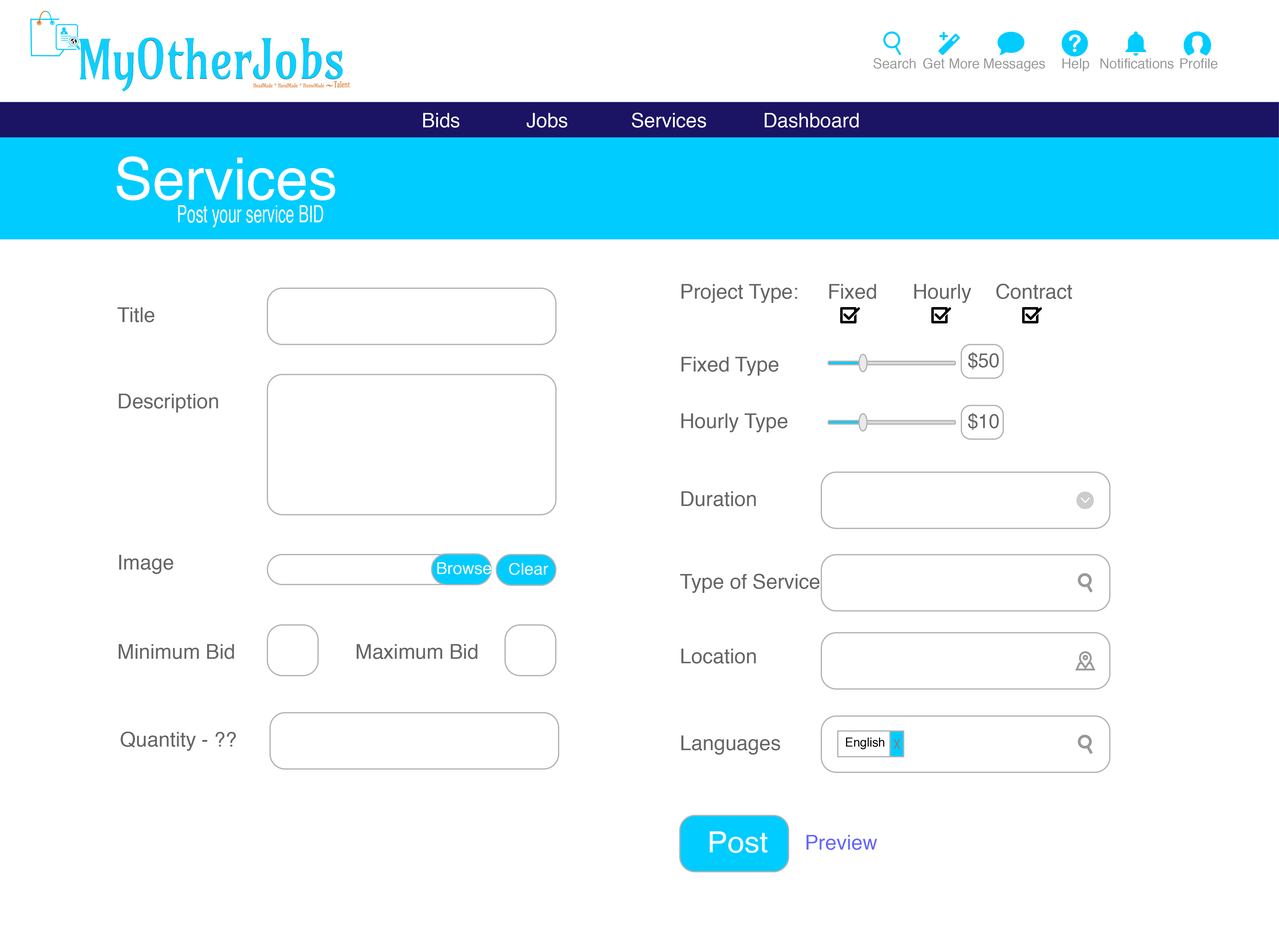
<style>
.page{position:relative;width:1279px;height:932px;background:#ffffff}
.page>*{position:absolute;margin:0}
.t1{font:54.1px "Amarante-Regular";color:#0fcefe;scale:0.9 1}
.t2{font:54.1px "Amarante-Regular";color:#0fcefe;scale:0.89 1}
.t3{font:13.7px "MyriadPro-Regular";color:#999999}
.t4{font:5.4px "Amarante-Regular";color:#de791f;scale:0.84 1}
.t5{font:8.6px "Amarante-Regular";color:#de791f;scale:1.4 1}
.t6{font:8.6px "Amarante-Regular";color:#de791f;scale:0.7 1}
.t7{font:19.8px "MyriadPro-Regular";color:#ffffff}
.t8{font:58.3px "MyriadPro-Regular";color:#ffffff}
.t9{font:23.5px "MyriadPro-Regular";color:#ffffff;scale:0.65 1}
.t10{font:20.4px "MyriadPro-Regular";color:#666666}
.t11{font:20.3px "MyriadPro-Regular";color:#666666;scale:0.95 1}
.t12{font:16.1px "MyriadPro-Regular";color:#ffffff;scale:1.04 1}
.t13{font:12.2px "MyriadPro-Regular";color:#000000}
.t14{font:29.4px "MyriadPro-Regular";color:#ffffff;scale:1.04 1}
.t15{font:20.4px "MyriadPro-Regular";color:#6666ff}
</style>
<div class="page">
<p class="t1" style="left:79px;top:39px;width:55px;height:52px">My</p>
<p class="t2" style="left:138px;top:37px;width:113px;height:42px">Other</p>
<p class="t1" style="left:253px;top:38px;width:90px;height:41px">Jobs</p>
<p class="t3" style="left:873px;top:58px;width:43px;height:11px">Search</p>
<p class="t3" style="left:923px;top:58px;width:56px;height:11px">Get More</p>
<p class="t3" style="left:984px;top:58px;width:61px;height:13px">Messages</p>
<p class="t3" style="left:1062px;top:58px;width:27px;height:13px">Help</p>
<p class="t3" style="left:1100px;top:58px;width:74px;height:11px">Notifications</p>
<p class="t3" style="left:1180px;top:58px;width:37px;height:11px">Profile</p>
<p class="t4" style="left:254px;top:83px;width:70px;height:5px">HeadMade * HandMade * HomeMade</p>
<p class="t5" style="left:326px;top:85px;width:7px;height:2px">~</p>
<p class="t6" style="left:334px;top:81px;width:16px;height:7px">Talent</p>
<p class="t7" style="left:423px;top:113px;width:36px;height:15px">Bids</p>
<p class="t7" style="left:527px;top:113px;width:40px;height:15px">Jobs</p>
<p class="t7" style="left:632px;top:113px;width:74px;height:15px">Services</p>
<p class="t7" style="left:765px;top:113px;width:94px;height:15px">Dashboard</p>
<p class="t8" style="left:117px;top:156px;width:218px;height:45px">Services</p>
<p class="t9" style="left:178px;top:205px;width:145px;height:22px">Post your service BID</p>
<p class="t10" style="left:681px;top:284px;width:116px;height:19px">Project Type:</p>
<p class="t10" style="left:829px;top:284px;width:47px;height:15px">Fixed</p>
<p class="t10" style="left:914px;top:284px;width:57px;height:19px">Hourly</p>
<p class="t10" style="left:996px;top:284px;width:76px;height:15px">Contract</p>
<p class="t10" style="left:117px;top:308px;width:37px;height:14px">Title</p>
<p class="t11" style="left:968px;top:352px;width:31px;height:18px">$50</p>
<p class="t10" style="left:681px;top:357px;width:97px;height:19px">Fixed Type</p>
<p class="t10" style="left:119px;top:394px;width:99px;height:19px">Description</p>
<p class="t10" style="left:681px;top:414px;width:106px;height:18px">Hourly Type</p>
<p class="t11" style="left:968px;top:413px;width:31px;height:17px">$10</p>
<p class="t10" style="left:681px;top:492px;width:75px;height:15px">Duration</p>
<p class="t10" style="left:119px;top:555px;width:54px;height:19px">Image</p>
<p class="t12" style="left:437px;top:563px;width:54px;height:12px">Browse</p>
<p class="t12" style="left:509px;top:563px;width:39px;height:12px">Clear</p>
<p class="t10" style="left:680px;top:574px;width:139px;height:19px">Type of Service</p>
<p class="t10" style="left:119px;top:644px;width:115px;height:15px">Minimum Bid</p>
<p class="t10" style="left:357px;top:644px;width:120px;height:15px">Maximum Bid</p>
<p class="t10" style="left:681px;top:649px;width:75px;height:15px">Location</p>
<p class="t10" style="left:120px;top:732px;width:116px;height:19px">Quantity - ??</p>
<p class="t10" style="left:681px;top:736px;width:99px;height:19px">Languages</p>
<p class="t13" style="left:846px;top:738px;width:38px;height:12px">English</p>
<p class="t14" style="left:710px;top:832px;width:57px;height:22px">Post</p>
<p class="t15" style="left:806px;top:835px;width:71px;height:15px">Preview</p>
</div>
